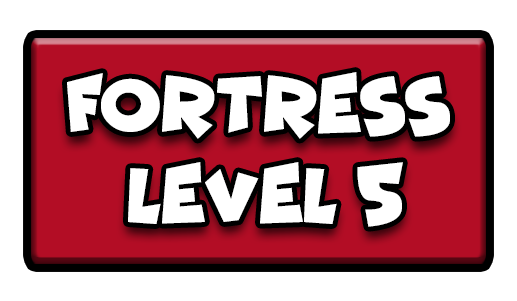
<style>
.page{position:relative;width:517px;height:301px;background:#ffffff}
.page>*{position:absolute;margin:0}
.t1{font:77.7px "Funhouse";color:#ffffff;scale:0.95 1}
</style>
<div class="page">
<p class="t1" style="left:67px;top:72px;width:383px;height:67px">FORTRESS</p>
<p class="t1" style="left:128px;top:162px;width:275px;height:65px">LEVEL 5</p>
</div>
